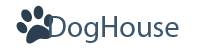
<style>
.page{position:relative;width:200px;height:50px;background:#ffffff}
.page>*{position:absolute;margin:0}
.t1{font:30px "MyriadPro-Regular";color:#3c566b}
</style>
<div class="page">
<p class="t1" style="left:49px;top:16px;width:130px;height:27px">DogHouse</p>
</div>
